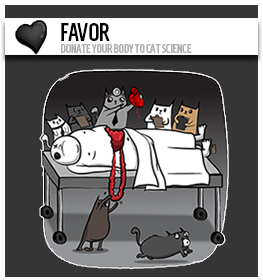
<style>
.page{position:relative;width:263px;height:280px;background:#353535}
.page>*{position:absolute;margin:0}
.t1{font:25px "HomenajeMod-Bold";color:#000000;scale:0.87 1}
.t2{font:12.5px "HomenajeMod-Bold";color:#afafaf;scale:0.87 1}
</style>
<div class="page">
<p class="t1" style="left:61px;top:23px;width:49px;height:18px">FAVOR</p>
<p class="t2" style="left:61px;top:44px;width:131px;height:9px">DONATE YOUR BODY TO CAT SCIENCE</p>
</div>
